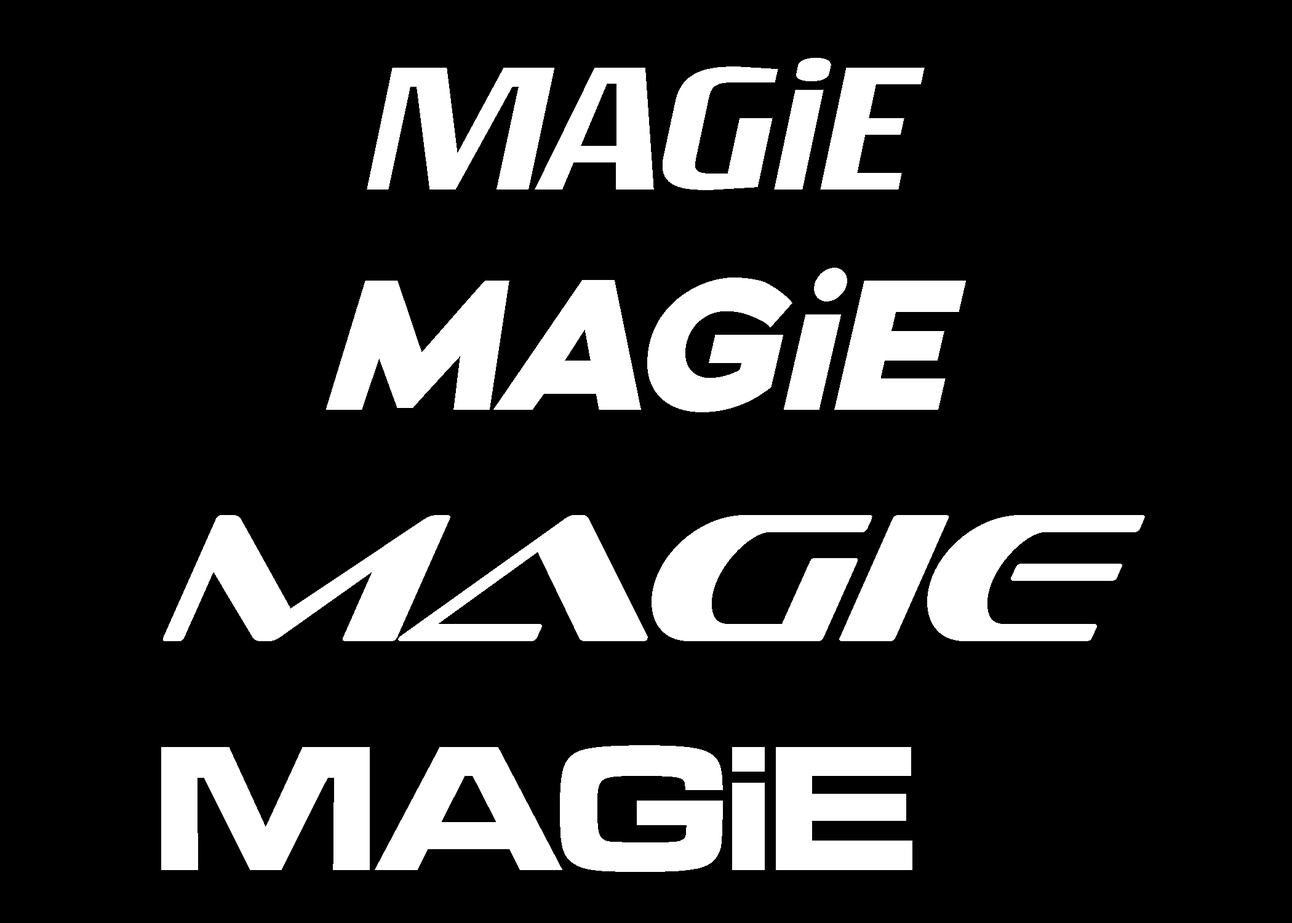
<style>
.page{position:relative;width:1292px;height:923px;background:#000000}
.page>*{position:absolute;margin:0}
.t1{font:184.6px "RogueSansExt-MediumIt";letter-spacing:-0.01em;color:#ffffff}
.t2{font:184.6px "Adrianna-ExtraboldItalic";letter-spacing:-0.01em;color:#ffffff}
.t3{font:184.6px "SofachromeBk-Italic";letter-spacing:-0.01em;color:#ffffff}
.t4{font:184.6px "MicrogrammaExtD-Bol";letter-spacing:-0.01em;color:#ffffff}
</style>
<div class="page">
<p class="t1" style="left:367px;top:58px;width:558px;height:132px">MAGiE</p>
<p class="t2" style="left:326px;top:268px;width:640px;height:144px">MAGiE</p>
<p class="t3" style="left:163px;top:515px;width:982px;height:126px">Magie</p>
<p class="t4" style="left:161px;top:745px;width:751px;height:127px">MAGiE</p>
</div>
